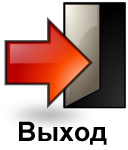
<style>
.page{position:relative;width:128px;height:150px;background:#ffffff}
.page>*{position:absolute;margin:0}
.t1{font:26.7px "Arial-BoldMT";color:#000000}
</style>
<div class="page">
<p class="t1" style="left:19px;top:121px;width:88px;height:24px">Выход</p>
</div>
